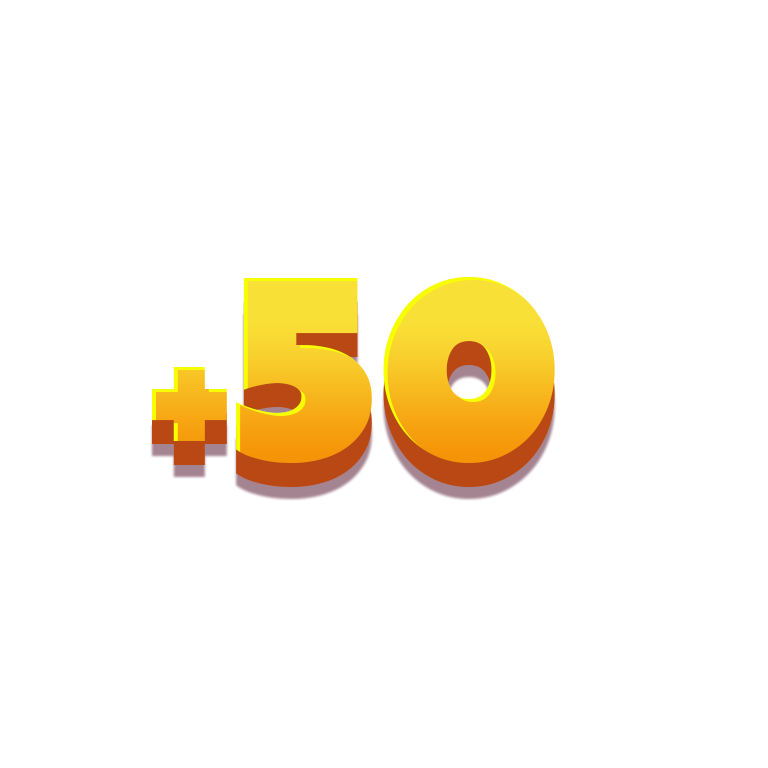
<style>
.page{position:relative;width:768px;height:768px;background:#ffffff}
.page>*{position:absolute;margin:0}
.t1{font:265.9px "Tondu-Beta"}
.t2{font:179.9px "Tondu-Beta"}
</style>
<div class="page">
<p class="t1" style="left:152px;top:277px;width:403px;height:186px"><span class="t2">+</span>50</p>
<p class="t1" style="left:152px;top:301px;width:403px;height:186px"><span class="t2">+</span>50</p>
</div>
